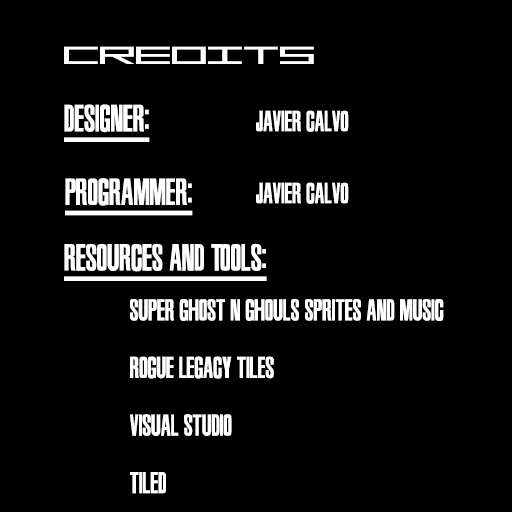
<style>
.page{position:relative;width:512px;height:512px;background:#000000}
.page>*{position:absolute;margin:0}
.t1{font:24px "MGS2Menu";color:#ffffff}
.t2{font:30.2px "Metal-Gear-Solid-2";color:#ffffff;text-decoration:underline}
.t3{font:23px "Metal-Gear-Solid-2";color:#ffffff}
.t4{font:30px "Metal-Gear-Solid-2";color:#ffffff;text-decoration:underline}
.t5{font:24px "Metal-Gear-Solid-2";color:#ffffff}
</style>
<div class="page">
<p class="t1" style="left:64px;top:46px;width:250px;height:18px">CREDITS</p>
<p class="t2" style="left:64px;top:104px;width:86px;height:38px">Designer:</p>
<p class="t3" style="left:256px;top:110px;width:93px;height:22px">Javier Calvo</p>
<p class="t4" style="left:65px;top:178px;width:128px;height:38px">Programmer:</p>
<p class="t3" style="left:256px;top:182px;width:93px;height:22px">Javier Calvo</p>
<p class="t4" style="left:64px;top:243px;width:203px;height:38px">Resources and Tools:</p>
<p class="t5" style="left:130px;top:299px;width:314px;height:195px">Super Ghost n Ghouls sprites and music<br><br>Rogue Legacy tiles<br><br>Visual Studio<br><br>Tiled</p>
</div>
